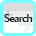
<style>
.page{position:relative;width:36px;height:36px;background:#77ffff}
.page>*{position:absolute;margin:0}
.t1{font:10.7px "AmiraParadiso";letter-spacing:-0.05em;color:#000000}
</style>
<div class="page">
<p class="t1" style="left:4px;top:14px;width:29px;height:8px;opacity:0.96">Search</p>
</div>
